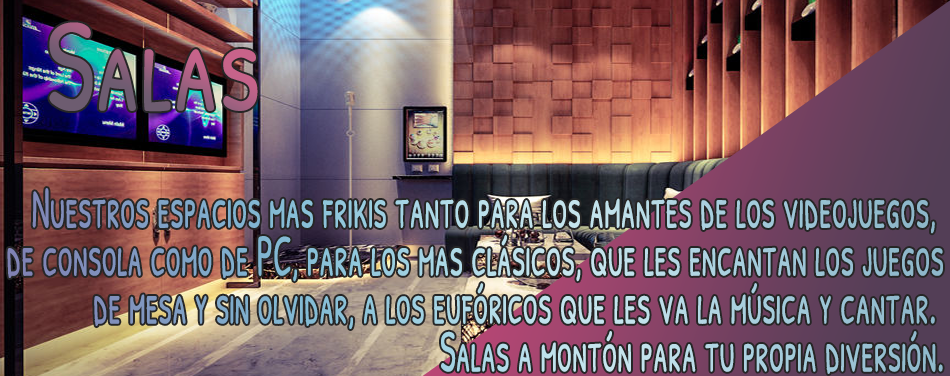
<style>
.page{position:relative;width:950px;height:376px}
.page>*{position:absolute;margin:0}
.t1{font:133.6px "PatrickHandSC-Regular";scale:0.79 1}
.t2{font:59.9px/47.9px "PatrickHandSC-Regular";scale:0.57 1}
</style>
<div class="page">
<p class="t1" style="left:49px;top:22px;width:209px;height:90px">Salas</p>
<p class="t2" style="left:7px;top:188px;width:936px;height:186px;text-align:right">Nuestros espacios mas frikis tanto para los amantes de los videojuegos, <br>de consola como de PC, para los mas clásicos, que les encantan los juegos<br>de mesa y sin olvidar, a los eufóricos que les va la música y cantar. <br>Salas a montón para tu propia diversión.</p>
</div>
